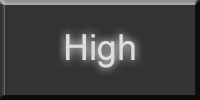
<style>
.page{position:relative;width:200px;height:100px;background:#333333}
.page>*{position:absolute;margin:0}
.t1{font:36px "ArialMT";color:#dddddd}
</style>
<div class="page">
<p class="t1" style="left:66px;top:34px;width:69px;height:34px">High</p>
</div>
